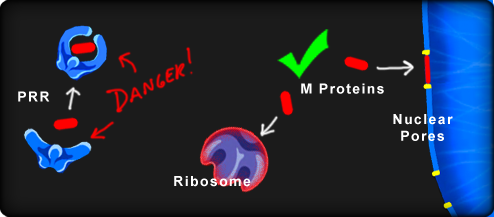
<style>
.page{position:relative;width:494px;height:217px;background:#1b1b1b}
.page>*{position:absolute;margin:0}
.t1{font:14px "Arial-BoldMT";letter-spacing:0.1em;color:#ffffff}
</style>
<div class="page">
<p class="t1" style="left:301px;top:83px;width:83px;height:11px">M Proteins</p>
<p class="t1" style="left:18px;top:91px;width:32px;height:11px">PRR</p>
<p class="t1" style="left:393px;top:114px;width:60px;height:27px;text-align:center">Nuclear<br>Pores</p>
<p class="t1" style="left:174px;top:176px;width:77px;height:11px">Ribosome</p>
</div>
